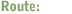
<style>
.page{position:relative;width:72px;height:14px;background:#ffffff}
.page>*{position:absolute;margin:0}
.t1{font:13.9px "BellGothicStd-Black";letter-spacing:-0.025em;color:#85a06e}
</style>
<div class="page">
<p class="t1" style="left:1px;top:0px;width:38px;height:12px">Route:</p>
</div>
